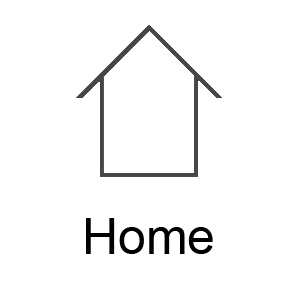
<style>
.page{position:relative;width:300px;height:300px;background:#ffffff}
.page>*{position:absolute;margin:0}
.t1{font:50px "ArialMT";color:#000000}
</style>
<div class="page">
<p class="t1" style="left:86px;top:218px;width:127px;height:36px">Home</p>
</div>
